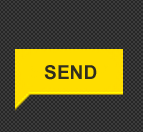
<style>
.page{position:relative;width:143px;height:132px;background:#3c3c3c}
.page>*{position:absolute;margin:0}
.t1{font:26.7px "Utsaah-Bold";color:#302e1f}
</style>
<div class="page">
<p class="t1" style="left:44px;top:65px;width:53px;height:15px">SEND</p>
</div>
